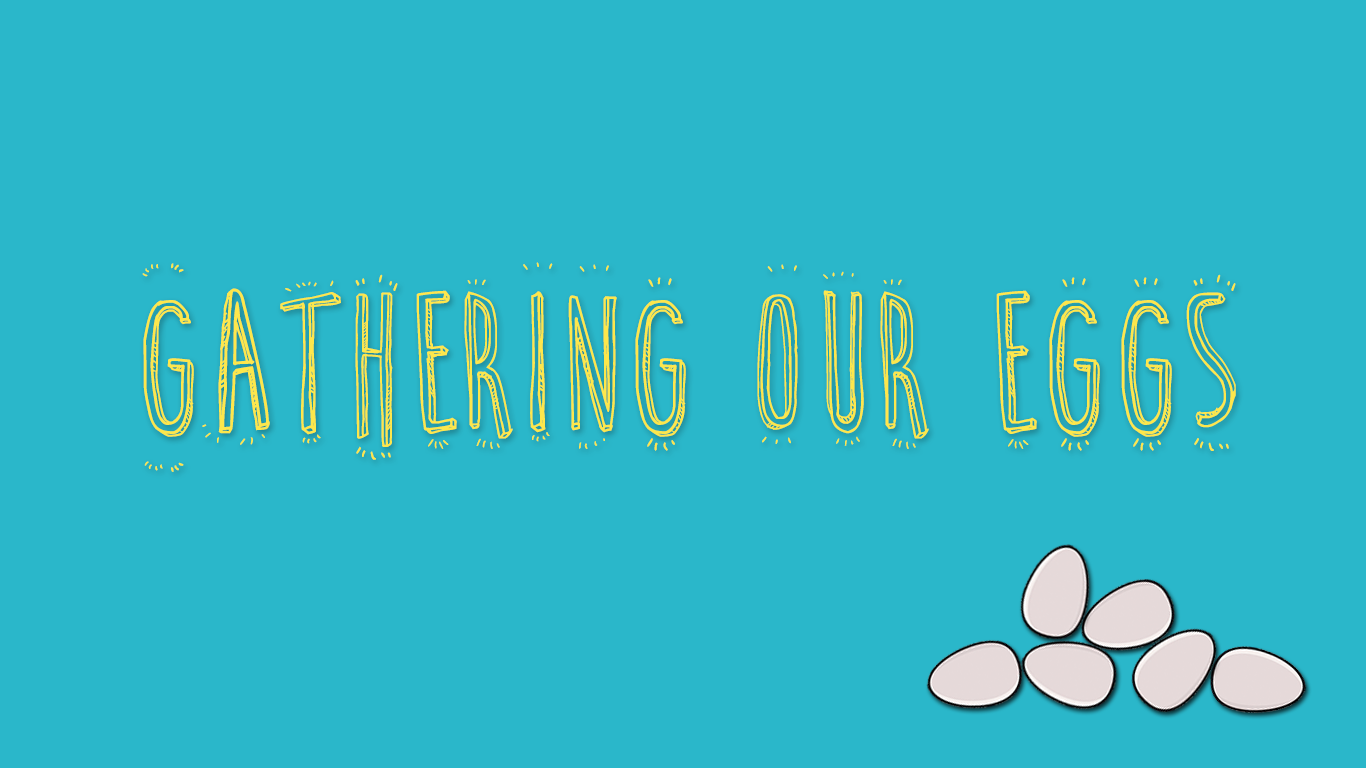
<style>
.page{position:relative;width:1366px;height:768px;background:#2ab7ca}
.page>*{position:absolute;margin:0}
.t1{font:200px "CuteCartoon";color:#fde74c}
</style>
<div class="page">
<p class="t1" style="left:142px;top:262px;width:1094px;height:210px">Gathering Our eggs</p>
</div>
